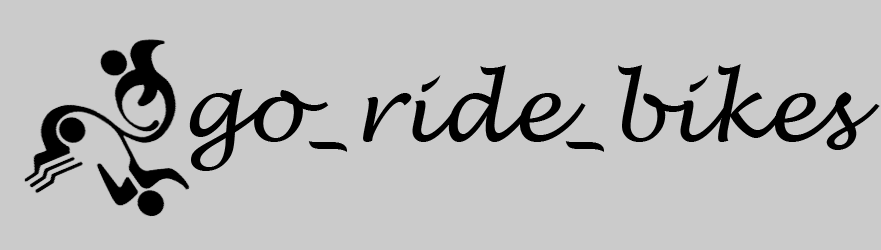
<style>
.page{position:relative;width:881px;height:250px;background:#cbcbcb}
.page>*{position:absolute;margin:0}
.t1{font:90px "LucidaHandwriting-Italic";color:#000000}
</style>
<div class="page">
<p class="t1" style="left:189px;top:64px;width:691px;height:107px">go_ride_bikes</p>
</div>
